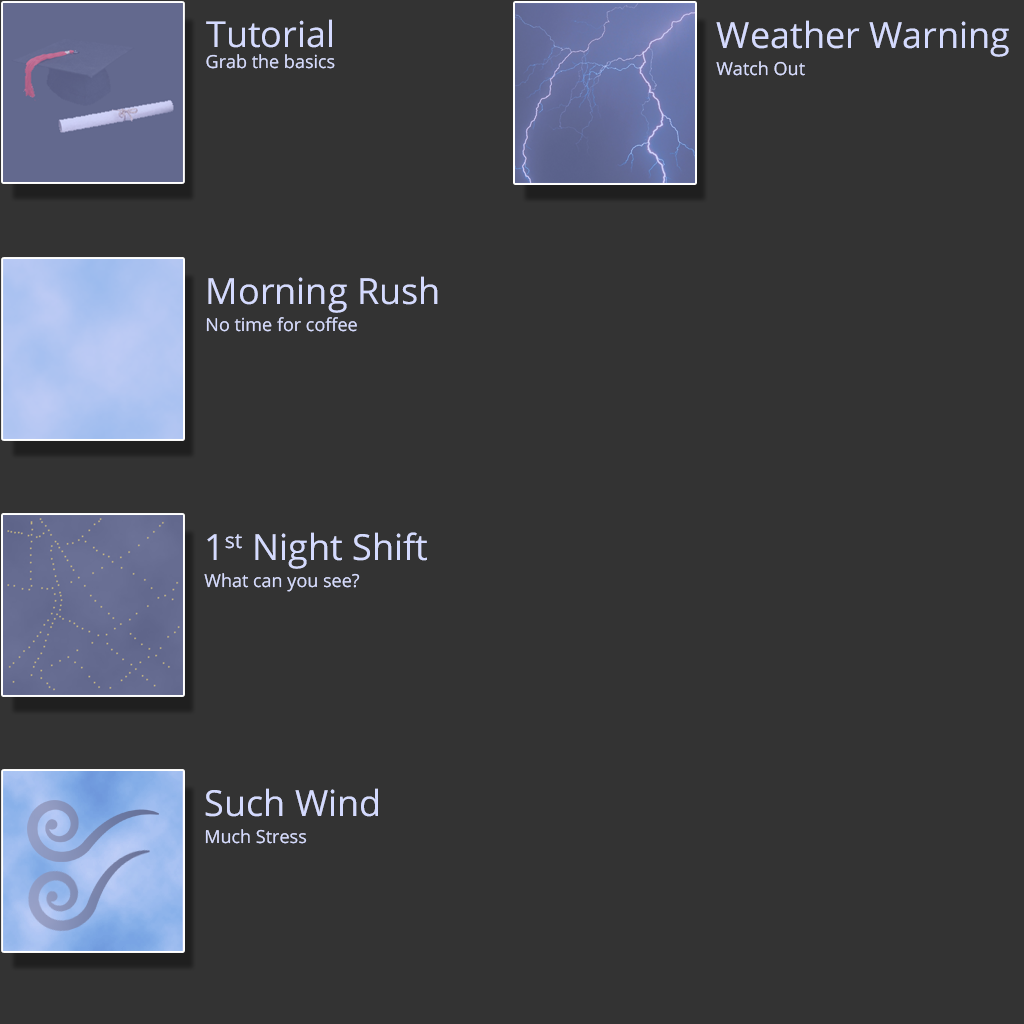
<style>
.page{position:relative;width:1024px;height:1024px;background:#333333}
.page>*{position:absolute;margin:0}
.t1{font:17.9px "OpenSans";color:#d4daff}
.t2{font:35.8px "OpenSans";color:#d4daff}
.t3{font:36px "OpenSans";color:#d4daff}
.t4{font:18px/27px "OpenSans";color:#d4daff}
</style>
<div class="page">
<p class="t1" style="left:206px;top:19px;width:129px;height:50px"><span class="t2">Tutorial<br></span>Grab the basics</p>
<p class="t1" style="left:206px;top:19px;width:129px;height:50px"><span class="t2">Tutorial<br></span>Grab the basics</p>
<p class="t3" style="left:716px;top:20px;width:293px;height:56px">Weather Warning<br><span class="t4">Watch Out</span></p>
<p class="t3" style="left:716px;top:20px;width:293px;height:56px">Weather Warning<br><span class="t4">Watch Out</span></p>
<p class="t4" style="left:206px;top:276px;width:232px;height:56px"><span class="t3">Morning Rush<br></span>No time for coffee</p>
<p class="t4" style="left:206px;top:276px;width:232px;height:56px"><span class="t3">Morning Rush<br></span>No time for coffee</p>
<p class="t4" style="left:204px;top:532px;width:223px;height:60px"><span class="t3">1st Night Shift<br></span>What can you see?</p>
<p class="t4" style="left:204px;top:532px;width:223px;height:60px"><span class="t3">1st Night Shift<br></span>What can you see?</p>
<p class="t4" style="left:205px;top:788px;width:173px;height:56px"><span class="t3">Such Wind<br></span>Much Stress</p>
<p class="t4" style="left:205px;top:788px;width:173px;height:56px"><span class="t3">Such Wind<br></span>Much Stress</p>
</div>
